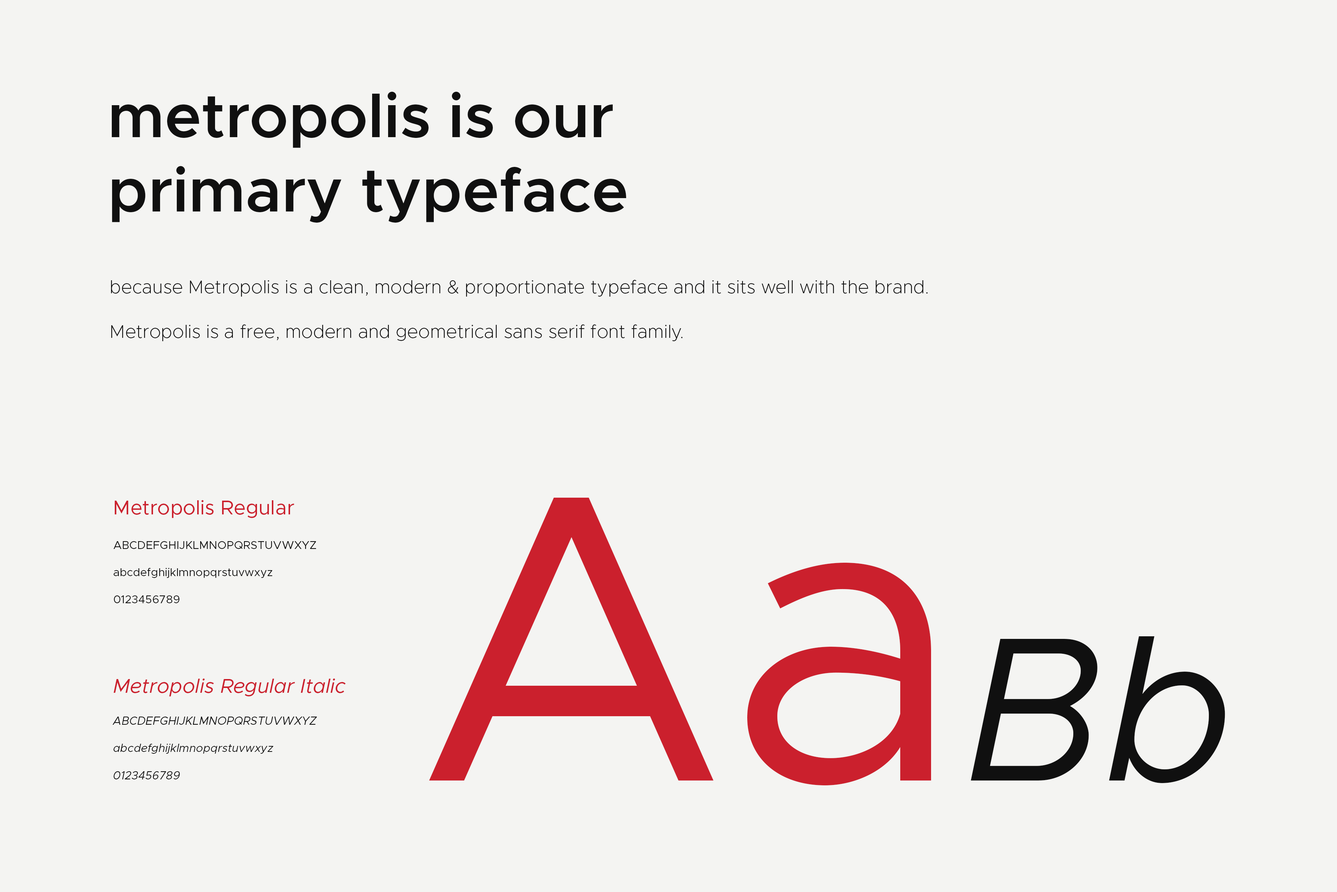
<style>
.page{position:relative;width:1337px;height:892px;background:#f4f4f2}
.page>*{position:absolute;margin:0}
.t1{font:61.9px "Metropolis-SemiBold";color:#101010}
.t2{font:18.6px "Metropolis-ExtraLight";color:#0f0f0f}
.t3{font:411.6px "Metropolis-Regular";color:#cb202d}
.t4{font:205.8px "Metropolis-RegularItalic";color:#101010}
.t5{font:11.4px "Metropolis-Regular";color:#101010}
.t6{font:20.2px "Metropolis-Regular";color:#cb202d}
.t7{font:11.4px "Metropolis-RegularItalic";color:#101010}
.t8{font:20.2px "Metropolis-RegularItalic";color:#cb202d}
</style>
<div class="page">
<p class="t1" style="left:112px;top:91px;width:514px;height:132px">metropolis is our<br>primary typeface</p>
<p class="t2" style="left:111px;top:280px;width:817px;height:61px">because Metropolis is a clean, modern &amp; proportionate typeface and it sits well with the brand.<br><br>Metropolis is a free, modern and geometrical sans serif font family.</p>
<p class="t3" style="left:429px;top:497px;width:797px;height:288px">Aa<span class="t4">Bb</span></p>
<p class="t5" style="left:113px;top:500px;width:203px;height:103px"><span class="t6">Metropolis Regular<br><br></span>ABCDEFGHIJKLMNOPQRSTUVWXYZ<br><br>abcdefghijklmnopqrstuvwxyz<br><br>0123456789</p>
<p class="t7" style="left:113px;top:678px;width:233px;height:101px"><span class="t8">Metropolis Regular Italic<br><br></span>ABCDEFGHIJKLMNOPQRSTUVWXYZ<br><br>abcdefghijklmnopqrstuvwxyz<br><br>0123456789</p>
</div>
